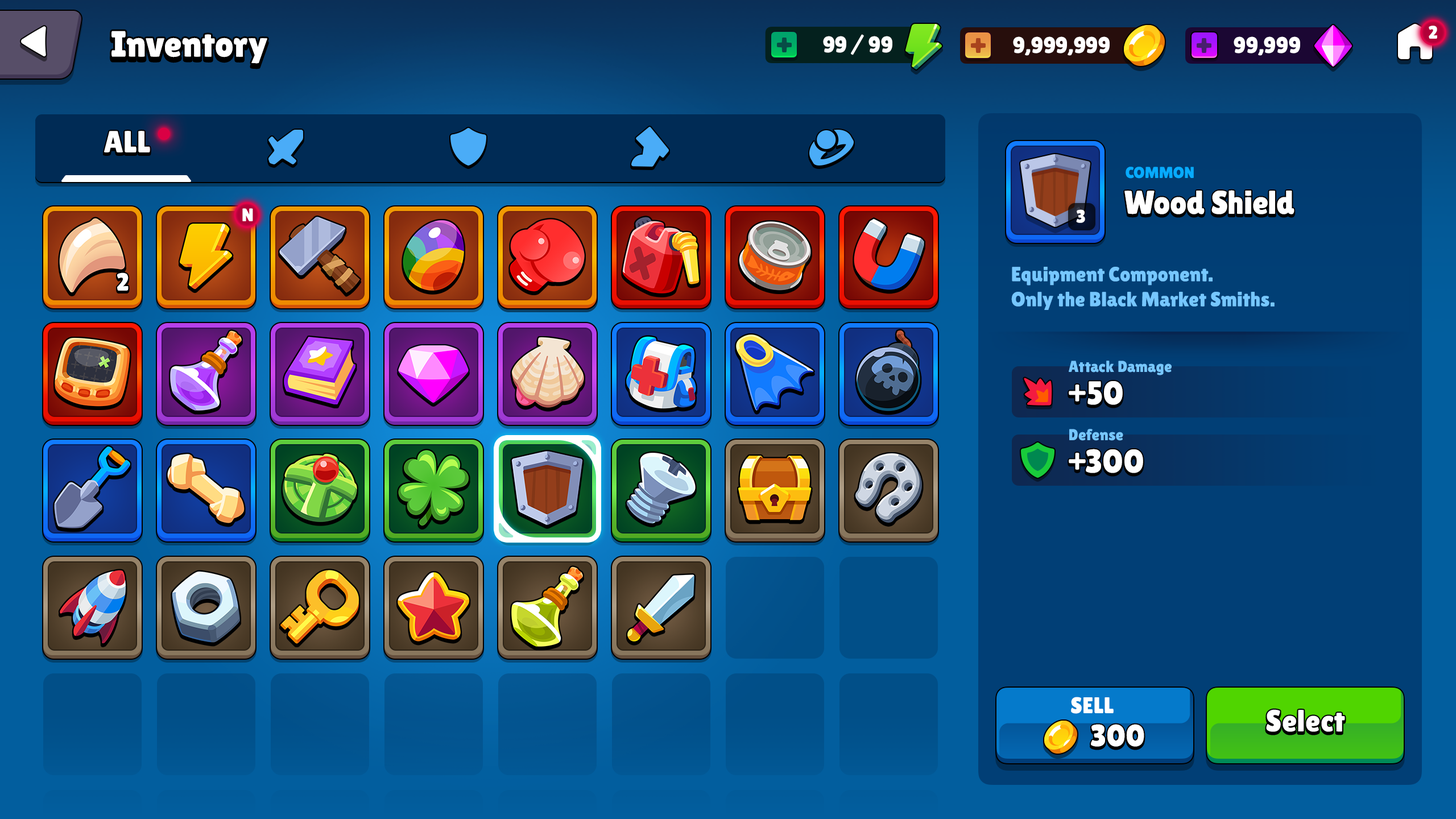
<style>
.page{position:relative;width:1456px;height:819px}
.page>*{position:absolute;margin:0}
.t1{font:18.2px "LilitaOne";color:#ffffff;text-transform:uppercase}
.t2{font:36.4px "LilitaOne";color:#ffffff}
.t3{font:22.7px "LilitaOne";letter-spacing:-0.01em;color:#ffffff;text-transform:uppercase}
.t4{font:30.7px "LilitaOne";letter-spacing:0.02em;color:#ffffff;text-transform:uppercase}
.t5{font:15.9px "LilitaOne";color:#07abff;text-transform:uppercase}
.t6{font:33px "LilitaOne";color:#ffffff}
.t7{font:18.2px "LilitaOne";color:#ffffff}
.t8{font:20.5px/25px "LilitaOne";color:#76c7ff}
.t9{font:25px "LilitaOne";letter-spacing:0.02em;color:#ffffff;text-transform:uppercase}
.t10{font:15.9px "LilitaOne";letter-spacing:0.02em;color:#76c7ff}
.t11{font:33px "LilitaOne";letter-spacing:0.02em;color:#ffffff}
.t12{font:22.7px "LilitaOne";letter-spacing:0.02em;color:#ffffff;text-transform:uppercase}
.t13{font:30.7px "LilitaOne";letter-spacing:0.02em;color:#ffffff}
</style>
<div class="page">
<p class="t1" style="left:1429px;top:26px;width:8px;height:13px">2</p>
<p class="t2" style="left:111px;top:31px;width:156px;height:33px">Inventory</p>
<p class="t3" style="left:823px;top:34px;width:69px;height:21px">99 / 99</p>
<p class="t3" style="left:1013px;top:36px;width:97px;height:20px">9,999,999</p>
<p class="t3" style="left:1234px;top:36px;width:66px;height:20px">99,999</p>
<p class="t4" style="left:104px;top:131px;width:46px;height:21px">All</p>
<p class="t5" style="left:1126px;top:167px;width:68px;height:12px">Common</p>
<p class="t6" style="left:1124px;top:190px;width:170px;height:24px">Wood Shield</p>
<p class="t1" style="left:242px;top:208px;width:11px;height:13px">N</p>
<p class="t7" style="left:1076px;top:209px;width:9px;height:14px">3</p>
<p class="t8" style="left:1011px;top:267px;width:264px;height:43px">Equipment Component. <br>Only the Black Market Smiths.</p>
<p class="t9" style="left:117px;top:272px;width:12px;height:19px">2</p>
<p class="t10" style="left:1069px;top:361px;width:103px;height:14px">Attack Damage</p>
<p class="t11" style="left:1069px;top:381px;width:54px;height:24px">+50</p>
<p class="t10" style="left:1069px;top:429px;width:54px;height:12px">Defense</p>
<p class="t11" style="left:1069px;top:449px;width:74px;height:24px">+300</p>
<p class="t12" style="left:1071px;top:697px;width:43px;height:17px">sell</p>
<p class="t13" style="left:1266px;top:709px;width:79px;height:23px">Select</p>
<p class="t13" style="left:1091px;top:724px;width:53px;height:23px">300</p>
</div>
